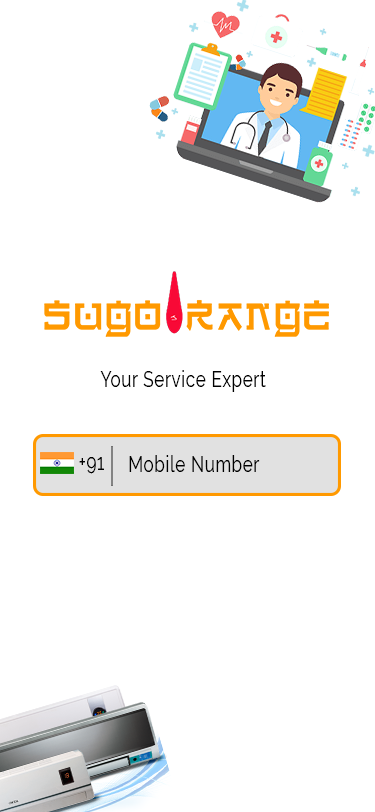
<style>
.page{position:relative;width:375px;height:812px;background:#ffffff}
.page>*{position:absolute;margin:0}
.t1{font:21.7px "Raleway-Regular";letter-spacing:0.05em;color:#000000;scale:0.77 1}
</style>
<div class="page">
<p class="t1" style="left:100px;top:370px;width:166px;height:22px">Your Service Expert</p>
<p class="t1" style="left:79px;top:457px;width:25px;height:17px">+91</p>
<p class="t1" style="left:129px;top:455px;width:131px;height:17px">Mobile Number</p>
</div>
